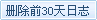
<style>
.page{position:relative;width:97px;height:20px}
.page>*{position:absolute;margin:0}
.t1{font:12px "SimSun";color:#294f76}
</style>
<div class="page">
<p class="t1" style="left:6px;top:5px;width:83px;height:11px">删除前30天日志</p>
</div>
